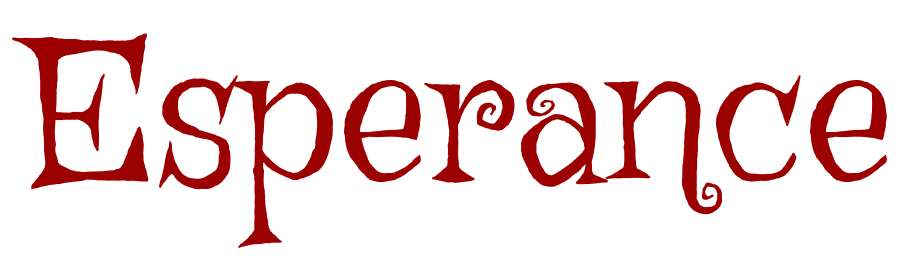
<style>
.page{position:relative;width:919px;height:259px;background:#ffffff}
.page>*{position:absolute;margin:0}
.t1{font:200px "Griffy-Regular";color:#9c0101}
</style>
<div class="page">
<p class="t1" style="left:11px;top:33px;width:876px;height:215px">Esperance</p>
</div>
